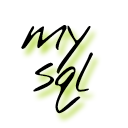
<style>
.page{position:relative;width:128px;height:128px;background:#ffffff}
.page>*{position:absolute;margin:0}
.t1{font:60px "NothingYouCouldDo";letter-spacing:-0.02em;color:#000000}
</style>
<div class="page">
<p class="t1" style="left:21px;top:25px;width:70px;height:49px">my</p>
<p class="t1" style="left:33px;top:52px;width:60px;height:62px">sql</p>
</div>
